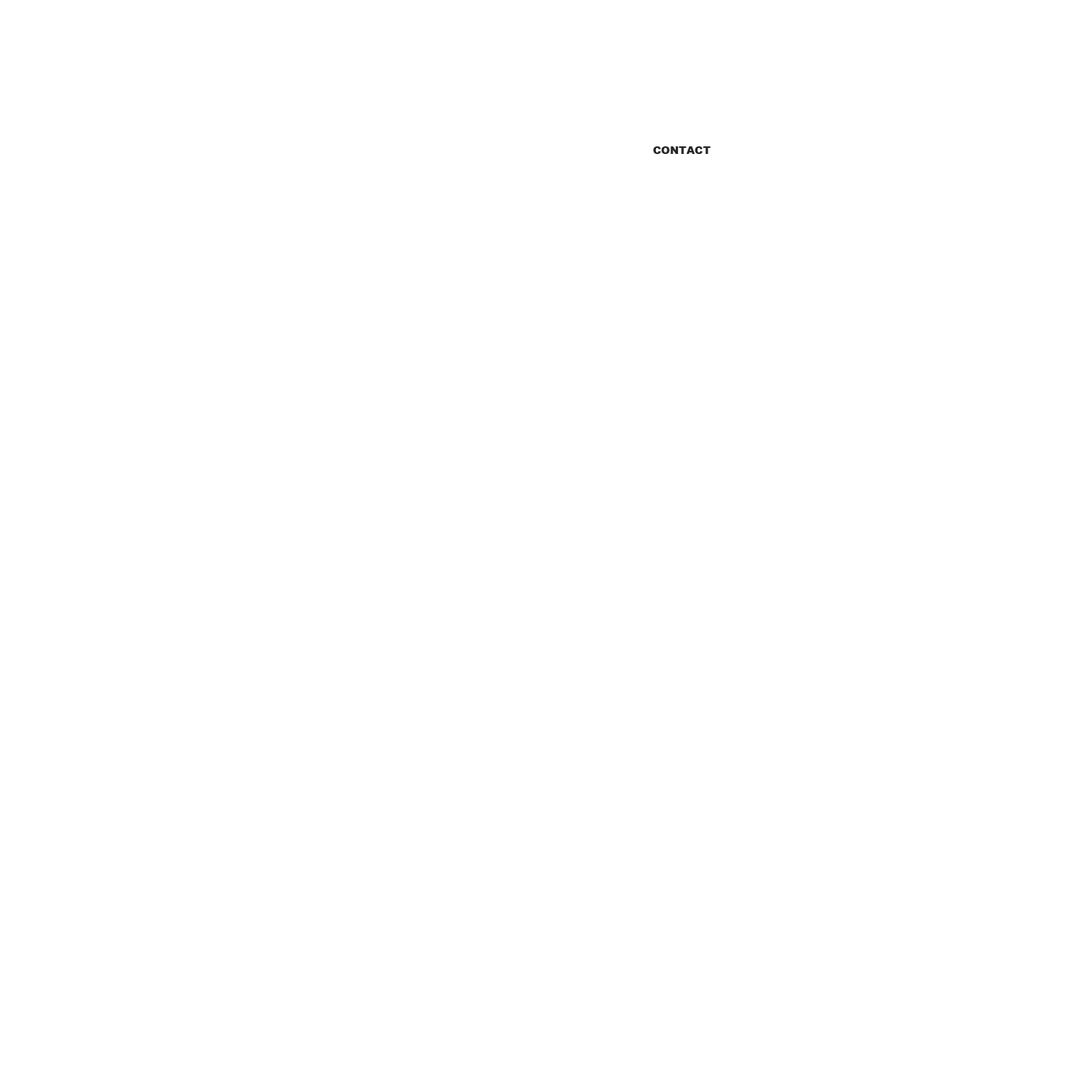
<style>
.page{position:relative;width:1092px;height:1092px;background:#ffffff}
.page>*{position:absolute;margin:0}
.t1{font:10.6px "Arial-Black";color:#252525}
</style>
<div class="page">
<p class="t1" style="left:653px;top:146px;width:58px;height:8px">CONTACT</p>
</div>
